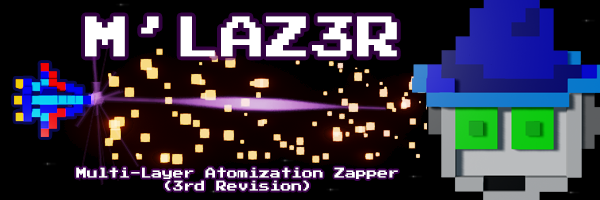
<style>
.page{position:relative;width:600px;height:200px;background:#000000}
.page>*{position:absolute;margin:0}
.t1{font:45.4px "PressStart2P-Regular";color:#ffffff}
.t2{font:11.1px "PressStart2P-Regular";color:#ffffff;scale:0.97 1}
</style>
<div class="page">
<p class="t1" style="left:85px;top:16px;width:312px;height:41px">M’LAZ3R</p>
<p class="t2" style="left:76px;top:167px;width:322px;height:24px;text-align:center">Multi-Layer Atomization Zapper<br>(3rd Revision)</p>
</div>
